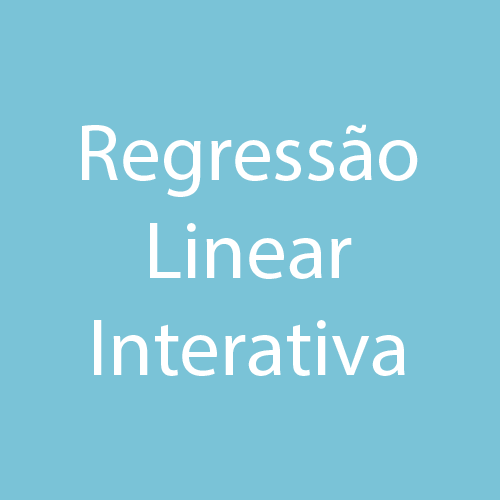
<style>
.page{position:relative;width:500px;height:500px;background:#7ac3d7}
.page>*{position:absolute;margin:0}
.t1{font:81.3px "MyriadPro-Regular";color:#ffffff}
</style>
<div class="page">
<p class="t1" style="left:82px;top:124px;width:336px;height:252px;text-align:center">Regressão<br>Linear<br>Interativa</p>
</div>
